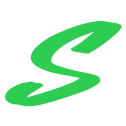
<style>
.page{position:relative;width:126px;height:126px;background:#ffffff}
.page>*{position:absolute;margin:0}
.t1{font:146.6px "QuickzagRegular";color:#2ecd51;font-weight:bold;scale:1.7 1}
</style>
<div class="page">
<p class="t1" style="left:5px;top:21px;width:117px;height:86px">S</p>
</div>
